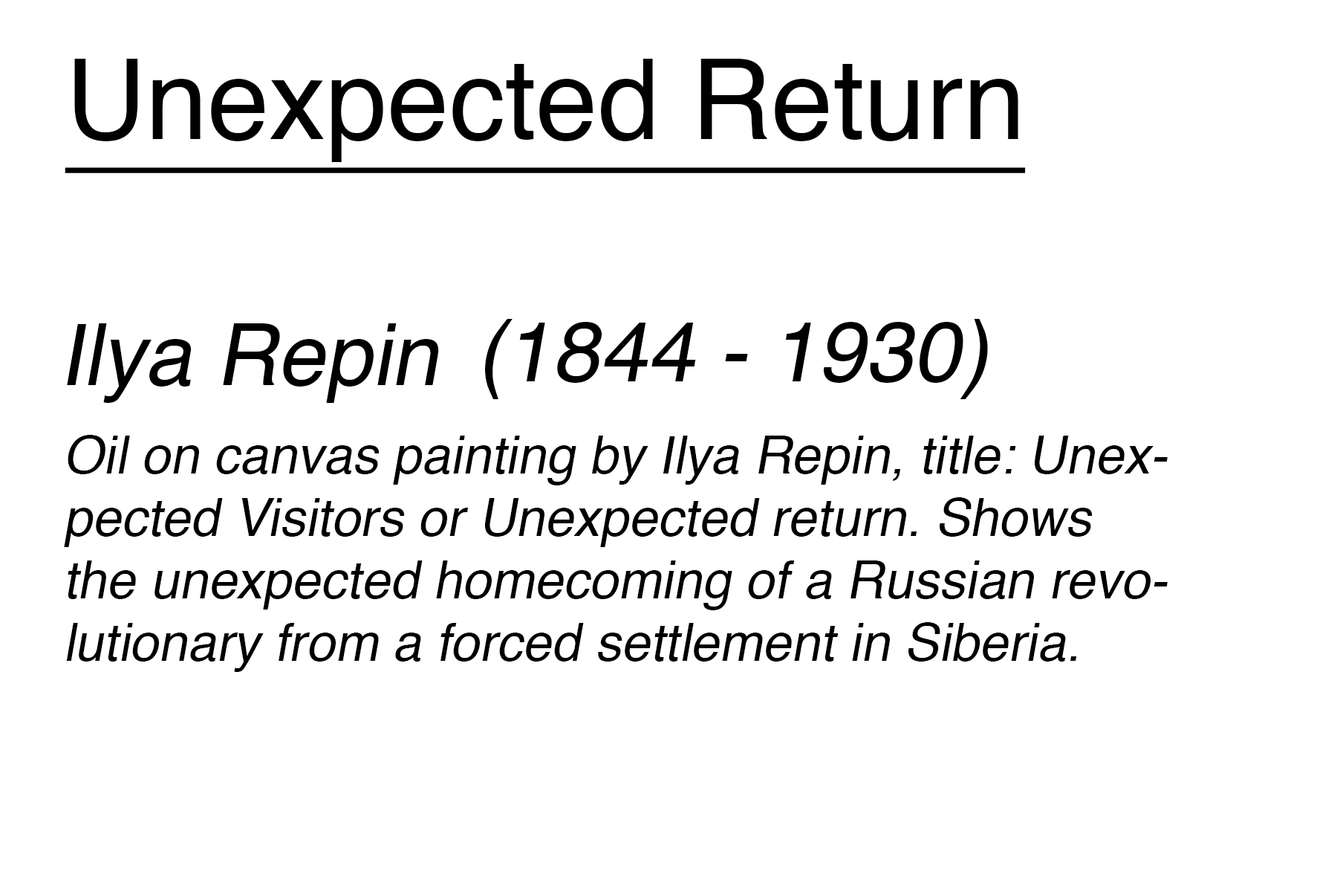
<style>
.page{position:relative;width:1337px;height:892px;background:#ffffff}
.page>*{position:absolute;margin:0}
.t1{font:111.5px "Helvetica";color:#000000;text-decoration:underline}
.t2{font:85.4px "Helvetica";color:#000000;font-style:italic}
.t3{font:52px "Helvetica";color:#000000;font-style:italic}
</style>
<div class="page">
<p class="t1" style="left:65px;top:59px;width:961px;height:114px">Unexpected Return</p>
<p class="t2" style="left:67px;top:323px;width:372px;height:80px">Ilya Repin</p>
<p class="t2" style="left:485px;top:319px;width:503px;height:80px">(1844 - 1930)</p>
<p class="t3" style="left:64px;top:435px;width:1104px;height:237px">Oil on canvas painting by Ilya Repin, title: Unexpected Visitors or Unexpected return. Shows the unexpected homecoming of a Russian revolutionary from a forced settlement in Siberia.</p>
</div>
